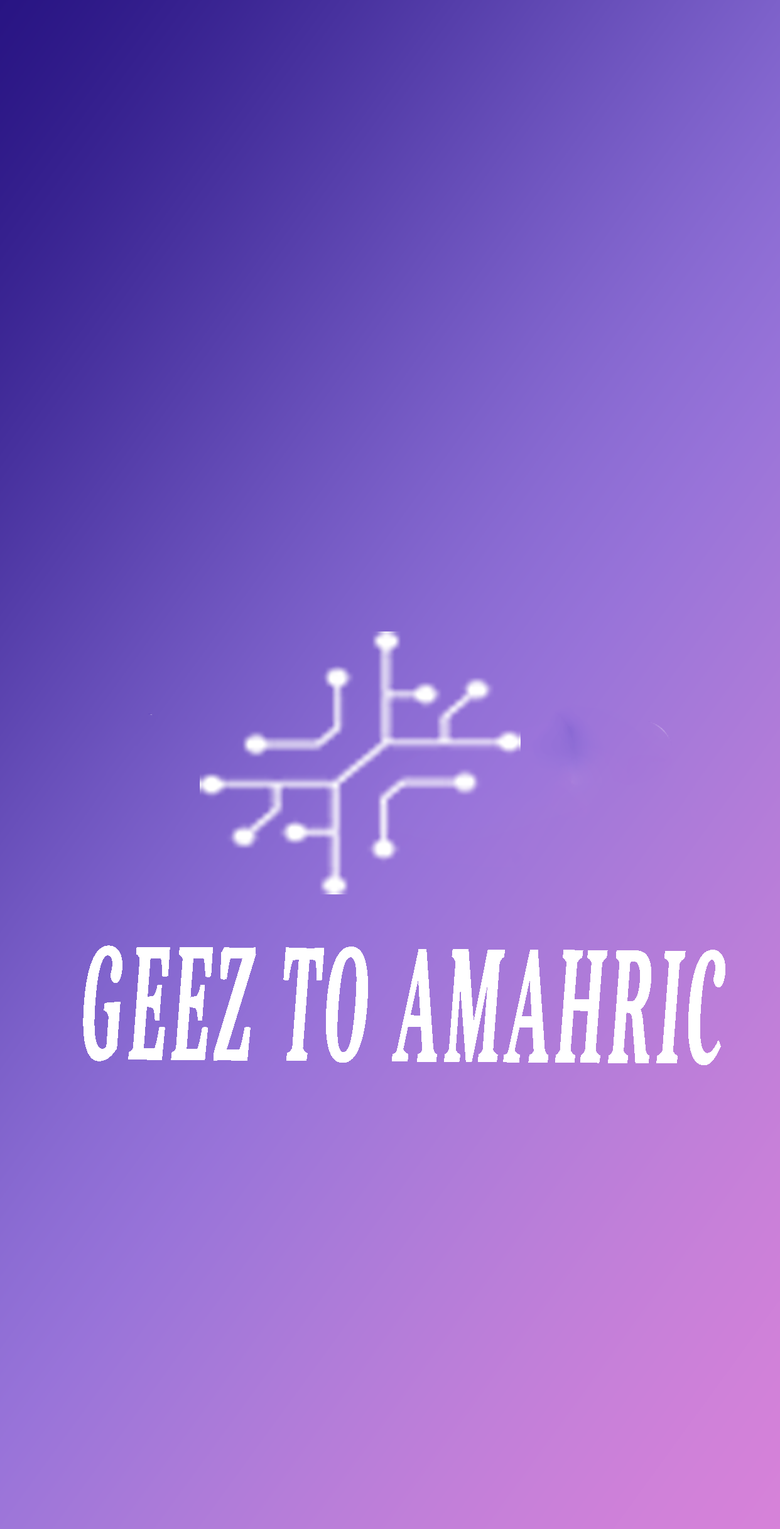
<style>
.page{position:relative;width:780px;height:1529px}
.page>*{position:absolute;margin:0}
.t1{font:167.9px "Caladea-Bold";letter-spacing:0.02em;color:#ffffff;text-transform:uppercase;font-weight:bold;font-style:italic;scale:0.4 1}
</style>
<div class="page">
<p class="t1" style="left:83px;top:945px;width:642px;height:120px">Geez to Amahric</p>
</div>
